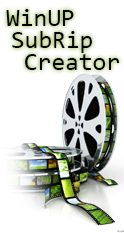
<style>
.page{position:relative;width:124px;height:233px;background:#ffffff}
.page>*{position:absolute;margin:0}
.t1{font:25px "Consolas";color:#000000}
</style>
<div class="page">
<p class="t1" style="left:6px;top:9px;width:68px;height:17px">WinUP</p>
<p class="t1" style="left:12px;top:31px;width:80px;height:22px">SubRip</p>
<p class="t1" style="left:25px;top:54px;width:95px;height:16px">Creator</p>
</div>
